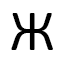
<style>
.page{position:relative;width:64px;height:64px;background:#ffffff}
.page>*{position:absolute;margin:0}
.t1{font:58.3px "Calibri";color:#000000}
</style>
<div class="page">
<p class="t1" style="left:11px;top:13px;width:42px;height:37px">Ж</p>
</div>
